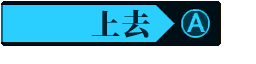
<style>
.page{position:relative;width:256px;height:64px;background:#ffffff}
.page>*{position:absolute;margin:0}
.t1{font:29.3px "SourceHanSerifCN-Heavy";letter-spacing:0.045em;color:#002334}
</style>
<div class="page">
<p class="t1" style="left:91px;top:9px;width:59px;height:29px">上去</p>
</div>
